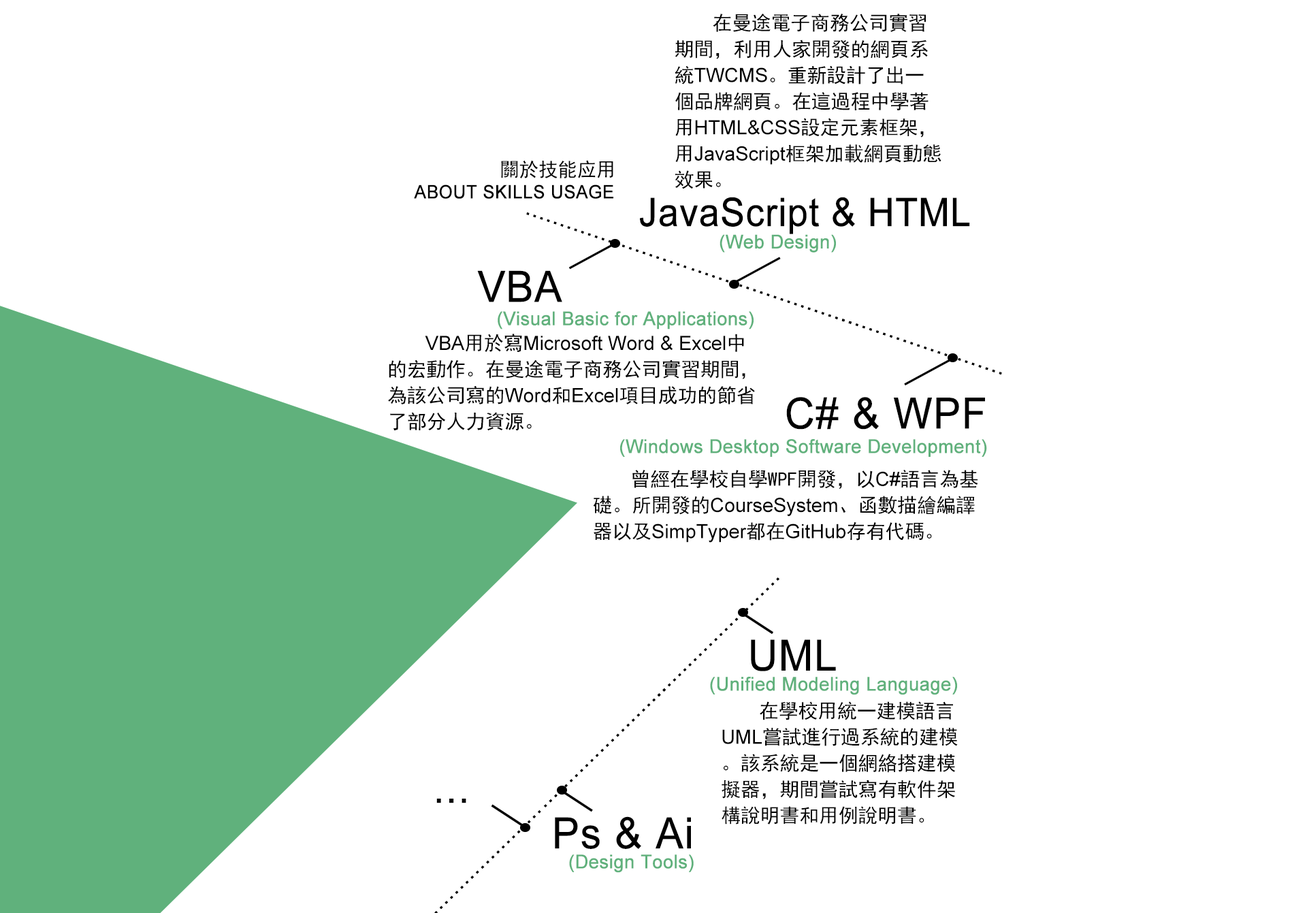
<style>
.page{position:relative;width:1307px;height:913px;background:#ffffff}
.page>*{position:absolute;margin:0}
.t1{font:19.6px/26.1px "SimHei";color:#000000}
.t2{font:19.6px/26.1px "ArialMT";color:#000000}
.t3{font:19.4px "SimHei";color:#000000}
.t4{font:18.3px "ArialMT";color:#000000;font-weight:bold;scale:0.96 1}
.t5{font:39.3px "ArialMT";color:#000000;font-weight:bold;scale:0.93 1}
.t6{font:19px "ArialMT";color:#60b17c;font-weight:bold;scale:0.97 1}
.t7{font:42.8px "ArialMT";color:#000000;font-weight:bold;scale:0.96 1}
</style>
<div class="page">
<p class="t1" style="left:674px;top:14px;width:267px;height:175px">在曼途電子商務公司實習期間，利用人家開發的網頁系統<span class="t2">TWCMS</span>。重新設計了出一個品牌網頁。在這過程中學著用<span class="t2">HTML&amp;CSS</span>設定元素框架，用<span class="t2">JavaScript</span>框架加載網頁動態效果。</p>
<p class="t3" style="left:501px;top:160px;width:112px;height:18px">關於技能应用</p>
<p class="t4" style="left:414px;top:184px;width:199px;height:15px">ABOUT SKILLS USAGE</p>
<p class="t5" style="left:640px;top:197px;width:330px;height:37px">JavaScript &amp; HTML</p>
<p class="t6" style="left:719px;top:234px;width:117px;height:18px">(Web Design)</p>
<p class="t7" style="left:477px;top:270px;width:85px;height:32px">VBA</p>
<p class="t6" style="left:497px;top:311px;width:256px;height:18px">(Visual Basic for Applications)</p>
<p class="t1" style="left:388px;top:333px;width:367px;height:98px"><span class="t2">VBA</span>用於寫<span class="t2">Microsoft Word &amp; Excel</span>中的宏動作。在曼途電子商務公司實習期間，為該公司寫的<span class="t2">Word</span>和<span class="t2">Excel</span>項目成功的節省了部分人力資源。</p>
<p class="t7" style="left:786px;top:397px;width:199px;height:32px">C# &amp; WPF</p>
<p class="t6" style="left:620px;top:439px;width:367px;height:18px">(Windows Desktop Software Development)</p>
<p class="t1" style="left:593px;top:470px;width:385px;height:72px">曾經在學校自學WPF開發，以<span class="t2">C#</span>語言為基礎。所開發的<span class="t2">CourseSystem</span>、函數描繪編譯器以及<span class="t2">SimpTyper</span>都在<span class="t2">GitHub</span>存有代碼。</p>
<p class="t7" style="left:751px;top:639px;width:85px;height:32px">UML</p>
<p class="t6" style="left:710px;top:676px;width:247px;height:19px">(Unified Modeling Language)</p>
<p class="t1" style="left:721px;top:701px;width:237px;height:123px">在學校用統一建模語言<span class="t2">UML</span>嘗試進行過系統的建模。該系統是一個網絡搭建模擬器，期間嘗試寫有軟件架構說明書和用例說明書。</p>
<p class="t7" style="left:436px;top:798px;width:30px;height:5px">...</p>
<p class="t7" style="left:555px;top:816px;width:136px;height:33px">Ps &amp; Ai</p>
<p class="t6" style="left:569px;top:854px;width:124px;height:18px">(Design Tools)</p>
</div>
